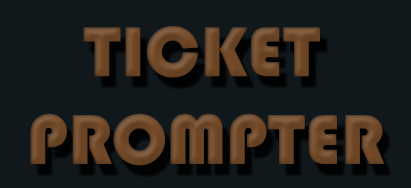
<style>
.page{position:relative;width:411px;height:188px;background:#11181c}
.page>*{position:absolute;margin:0}
.t1{font:73.2px "Bauhaus93";color:#734a28;text-transform:uppercase}
</style>
<div class="page">
<p class="t1" style="left:30px;top:26px;width:355px;height:140px">Ticket <br>Prompter</p>
</div>
